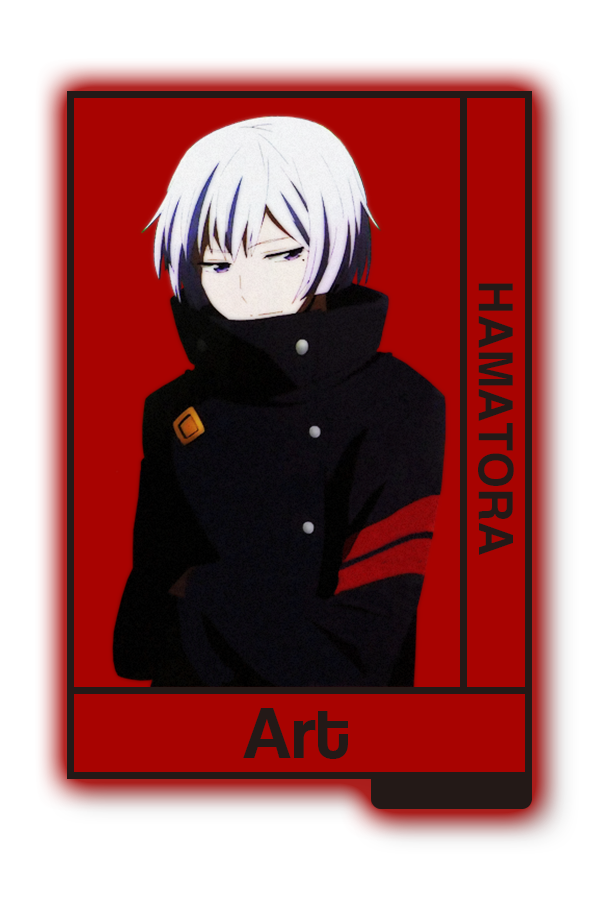
<style>
.page{position:relative;width:600px;height:900px;background:#a80301}
.page>*{position:absolute;margin:0}
.t1{font:47.4px "Helvetica-Bold";color:#231917}
.t2{font:75px "CoolveticaRg-Regular";color:#231917}
</style>
<div class="page">
<p class="t1" style="left:478px;top:283px;width:36px;height:272px;rotate:90deg">HAMATORA</p>
<p class="t2" style="left:243px;top:708px;width:105px;height:51px">Art</p>
</div>
